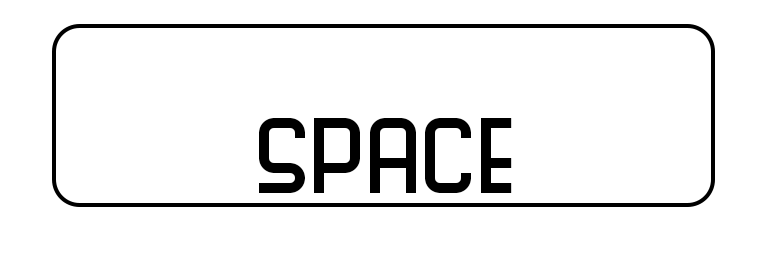
<style>
.page{position:relative;width:768px;height:256px;background:#ffffff}
.page>*{position:absolute;margin:0}
.t1{font:100px "ScienceFair";color:#000000}
</style>
<div class="page">
<p class="t1" style="left:259px;top:118px;width:253px;height:75px">Space</p>
</div>
